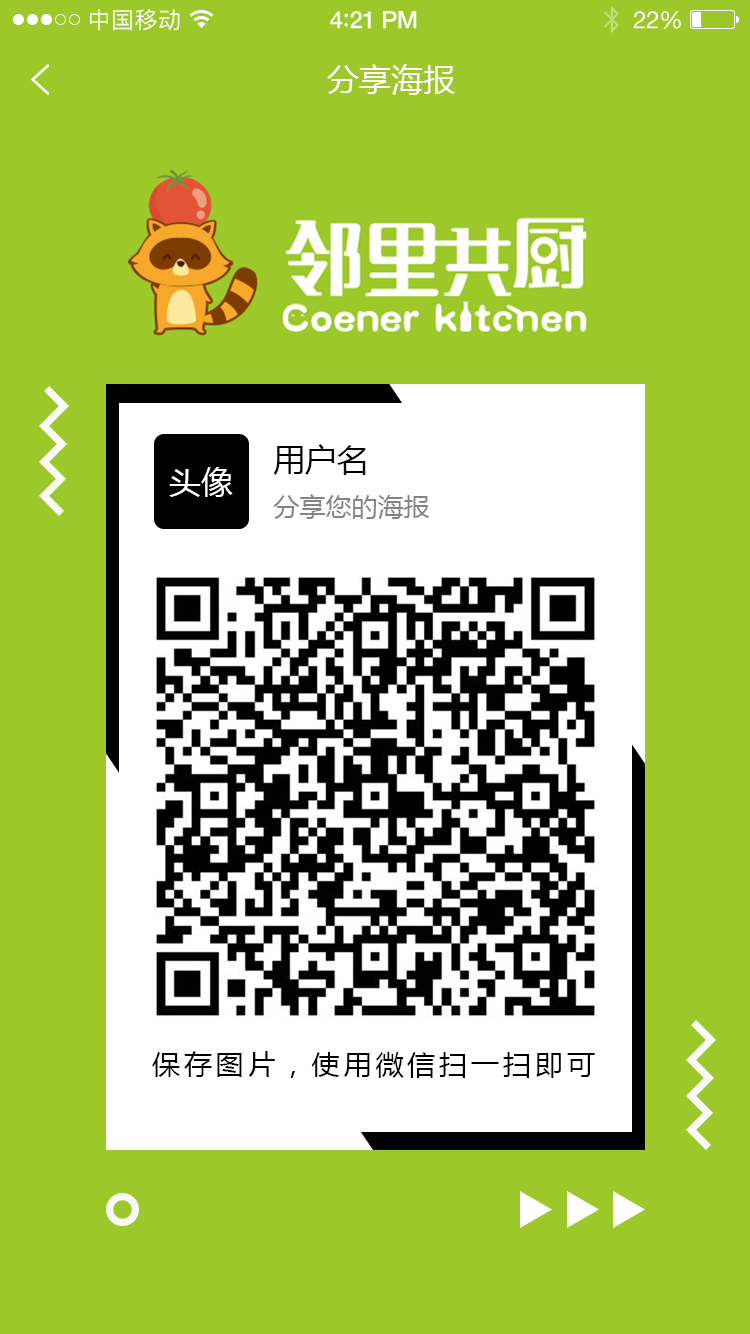
<style>
.page{position:relative;width:750px;height:1334px;background:#9cc829}
.page>*{position:absolute;margin:0}
.t1{font:23px "PingFangSC-Regular";letter-spacing:0.02em;color:#ffffff}
.t2{font:24px "HelveticaNeue-Medium";letter-spacing:-0.02em;color:#ffffff}
.t3{font:26px "Avenir-Medium";letter-spacing:-0.02em;color:#ffffff}
.t4{font:24px "HelveticaNeue";letter-spacing:-0.02em;color:#ffffff}
.t5{font:32px "MicrosoftYaHei";color:#ffffff;text-transform:uppercase}
.t6{font:32px "MicrosoftYaHei";color:#000000;text-transform:uppercase}
.t7{font:26px "MicrosoftYaHei";color:#848484;text-transform:uppercase}
.t8{font:28px "MicrosoftYaHei";letter-spacing:0.14em;color:#000000;text-transform:uppercase}
</style>
<div class="page">
<p class="t1" style="left:90px;top:9px;width:90px;height:22px">中国移动</p>
<p class="t2" style="left:330px;top:11px;width:87px;height:18px">4<span class="t3">:</span>21 PM</p>
<p class="t4" style="left:633px;top:11px;width:48px;height:18px">22%</p>
<p class="t5" style="left:327px;top:64px;width:128px;height:31px">分享海报</p>
<p class="t6" style="left:273px;top:444px;width:93px;height:31px">用户名</p>
<p class="t5" style="left:169px;top:467px;width:64px;height:30px">头像</p>
<p class="t7" style="left:273px;top:494px;width:157px;height:25px">分享您的海报</p>
<p class="t8" style="left:152px;top:1051px;width:443px;height:27px">保存图片，使用微信扫一扫即可</p>
</div>
